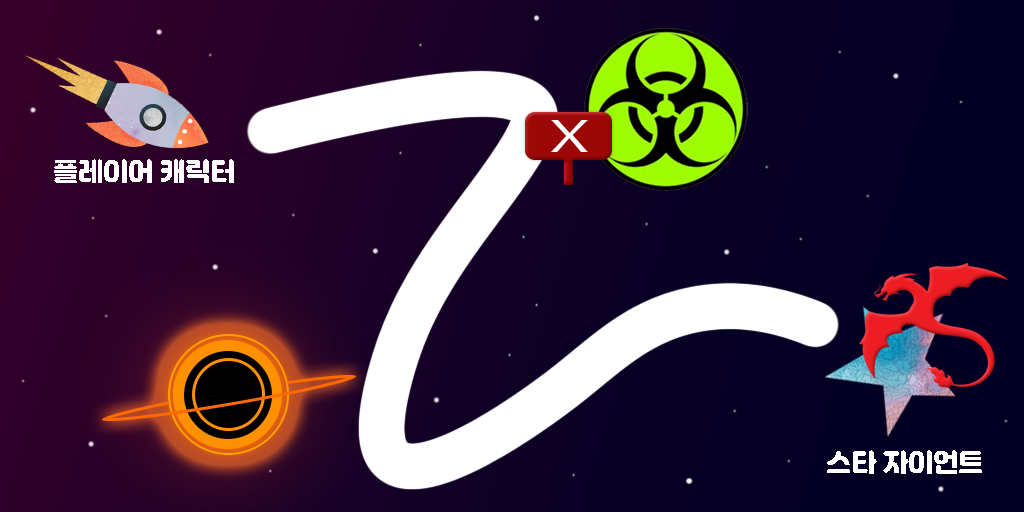
<style>
.page{position:relative;width:1024px;height:512px}
.page>*{position:absolute;margin:0}
.t1{font:41.8px "NanumBarunGothic";letter-spacing:-0.077em;color:#ffffff;text-transform:uppercase;scale:1.51 1}
.t2{font:25px "Jalnan";color:#ffffff}
</style>
<div class="page">
<p class="t1" style="left:551px;top:120px;width:37px;height:32px">X</p>
<p class="t2" style="left:54px;top:159px;width:180px;height:24px">플레이어 캐릭터</p>
<p class="t2" style="left:827px;top:450px;width:155px;height:24px">스타 자이언트</p>
</div>
